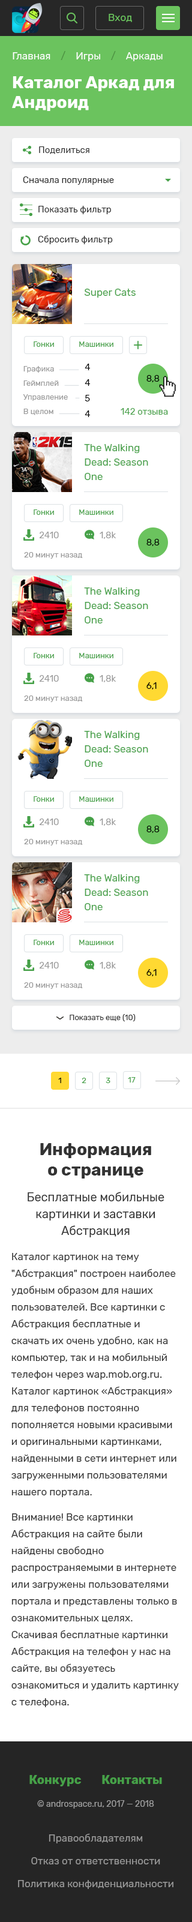
<style>
.page{position:relative;width:192px;height:1922px;background:#ffffff}
.page>*{position:absolute;margin:0}
.t1{font:10.2px "Rubik-Regular";color:#6bc35e}
.t2{font:16.8px/14.4px "Rubik-Bold";color:#ffffff}
.t3{font:10.2px/14.4px "Rubik-Regular";color:#ffffff}
.t4{font:10.2px/14.4px "Rubik-Regular";color:#4c9141}
.t5{font:16.8px "Rubik-Bold";color:#ffffff}
.t6{font:9px "Rubik-Regular";color:#272727}
.t7{font:10.2px "Rubik-Regular";color:#46a148}
.t8{font:7.8px "Rubik-Regular";color:#46a148}
.t9{font:9px "Rubik-Regular";color:#000000}
.t10{font:7.8px "Rubik-Regular";color:#999999}
.t11{font:9px "Rubik-Regular";color:#46a148}
.t12{font:10.2px/14.4px "Rubik-Regular";color:#46a148}
.t13{font:9px "Rubik-Regular";color:#999999}
.t14{font:7.8px "Rubik-Regular";color:#333333}
.t15{font:7.8px "Rubik-Regular";color:#000000}
.t16{font:10.2px/16.8px "Rubik-Regular";color:#333333}
.t17{font:16.8px "Rubik-Bold";color:#333333}
.t18{font:12px/16.8px "Rubik-Regular";color:#333333}
.t19{font:10.2px/16.8px "Rubik-Regular";color:#999999}
.t20{font:12px/16.8px "Rubik-Bold";color:#46a148}
.t21{font:8.4px/16.8px "Rubik-Regular";color:#999999}
</style>
<div class="page">
<p class="t1" style="left:109px;top:14px;width:23px;height:8px">Вход</p>
<p class="t2" style="left:12px;top:51px;width:162px;height:60px"><span class="t3">Главная    </span><span class="t4">/</span><span class="t3">    Игры    </span><span class="t4">/</span><span class="t3">    Аркады<br></span>Каталог Аркад для<br><span class="t5">Андроид</span></p>
<p class="t6" style="left:39px;top:146px;width:50px;height:8px">Поделиться</p>
<p class="t6" style="left:23px;top:176px;width:91px;height:9px">Сначала популярные</p>
<p class="t6" style="left:38px;top:206px;width:73px;height:8px">Показать фильтр</p>
<p class="t6" style="left:38px;top:235px;width:75px;height:9px">Сбросить фильтр</p>
<p class="t7" style="left:85px;top:289px;width:51px;height:9px">Super Cats</p>
<p class="t8" style="left:34px;top:341px;width:20px;height:6px">Гонки</p>
<p class="t8" style="left:79px;top:341px;width:34px;height:6px">Машинки</p>
<p class="t9" style="left:85px;top:364px;width:6px;height:53px">4<br>4<br>5<br>4</p>
<p class="t10" style="left:23px;top:366px;width:45px;height:49px">Графика<br>Геймплей<br>Управление<br>В целом</p>
<p class="t9" style="left:146px;top:375px;width:14px;height:7px">8,8</p>
<p class="t11" style="left:121px;top:408px;width:47px;height:7px">142 отзыва</p>
<p class="t12" style="left:84px;top:444px;width:64px;height:36px">The Walking Dead: Season One</p>
<p class="t8" style="left:34px;top:509px;width:20px;height:6px">Гонки</p>
<p class="t8" style="left:79px;top:509px;width:34px;height:6px">Машинки</p>
<p class="t13" style="left:39px;top:532px;width:20px;height:6px">2410</p>
<p class="t13" style="left:100px;top:532px;width:16px;height:7px">1,8k</p>
<p class="t9" style="left:146px;top:539px;width:14px;height:7px">8,8</p>
<p class="t10" style="left:24px;top:552px;width:58px;height:7px">20 минут назад</p>
<p class="t12" style="left:84px;top:587px;width:64px;height:36px">The Walking Dead: Season One</p>
<p class="t8" style="left:34px;top:653px;width:20px;height:5px">Гонки</p>
<p class="t8" style="left:79px;top:653px;width:34px;height:5px">Машинки</p>
<p class="t13" style="left:39px;top:675px;width:20px;height:7px">2410</p>
<p class="t13" style="left:100px;top:675px;width:16px;height:7px">1,8k</p>
<p class="t9" style="left:146px;top:682px;width:11px;height:7px">6,1</p>
<p class="t10" style="left:24px;top:695px;width:58px;height:7px">20 минут назад</p>
<p class="t12" style="left:84px;top:731px;width:64px;height:36px">The Walking Dead: Season One</p>
<p class="t8" style="left:34px;top:796px;width:20px;height:6px">Гонки</p>
<p class="t8" style="left:79px;top:796px;width:34px;height:6px">Машинки</p>
<p class="t13" style="left:39px;top:818px;width:20px;height:7px">2410</p>
<p class="t13" style="left:100px;top:818px;width:16px;height:8px">1,8k</p>
<p class="t9" style="left:146px;top:826px;width:14px;height:7px">8,8</p>
<p class="t10" style="left:24px;top:839px;width:58px;height:6px">20 минут назад</p>
<p class="t12" style="left:84px;top:874px;width:64px;height:36px">The Walking Dead: Season One</p>
<p class="t8" style="left:34px;top:940px;width:20px;height:5px">Гонки</p>
<p class="t8" style="left:79px;top:940px;width:34px;height:5px">Машинки</p>
<p class="t13" style="left:39px;top:962px;width:20px;height:6px">2410</p>
<p class="t13" style="left:100px;top:962px;width:16px;height:7px">1,8k</p>
<p class="t9" style="left:146px;top:969px;width:11px;height:7px">6,1</p>
<p class="t10" style="left:24px;top:982px;width:58px;height:7px">20 минут назад</p>
<p class="t14" style="left:70px;top:1014px;width:66px;height:7px">Показать еще (10)</p>
<p class="t15" style="left:58px;top:1078px;width:3px;height:5px">1</p>
<p class="t8" style="left:82px;top:1078px;width:4px;height:5px">2</p>
<p class="t8" style="left:106px;top:1078px;width:4px;height:5px">3</p>
<p class="t8" style="left:128px;top:1077px;width:8px;height:5px">17</p>
<p class="t16" style="left:11px;top:1143px;width:168px;height:564px;text-align:center"><span class="t17">Информация<br>о странице<br></span><span class="t18">Бесплатные мобильные картинки и заставки Абстракция<br></span>Каталог картинок на тему "Абстракция" построен наиболее удобным образом для наших пользователей. Все картинки с Абстракция бесплатные и скачать их очень удобно, как на компьютер, так и на мобильный телефон через wap.mob.org.ru. Каталог картинок «Абстракция» для телефонов постоянно пополняется новыми красивыми и оригинальными картинками, найденными в сети интернет или загруженными пользователями нашего портала.<br>Внимание! Все картинки Абстракция на сайте были найдены свободно распространяемыми в интернете или загружены пользователями портала и представлены только в ознакомительных целях. Скачивая бесплатные картинки Абстракция на телефон у нас на сайте, вы обязуетесь ознакомиться и удалить картинку с телефона.</p>
<p class="t19" style="left:18px;top:1775px;width:155px;height:114px;text-align:center"><span class="t20">Конкурс        Контакты<br></span><span class="t21">© androspace.ru, 2017 — 2018<br></span>Правообладателям<br>Отказ от ответственности<br>Политика конфиденциальности</p>
</div>
